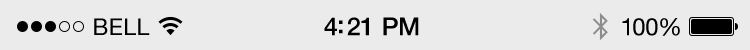
<style>
.page{position:relative;width:750px;height:50px;background:#ecebeb}
.page>*{position:absolute;margin:0}
.t1{font:25px "HelveticaNeue-Medium";letter-spacing:-0.02em;color:#000000}
.t2{font:23px "HelveticaNeue";letter-spacing:0.02em;color:#000000}
.t3{font:24px "HelveticaNeue";letter-spacing:-0.02em;color:#010101}
</style>
<div class="page">
<p class="t1" style="left:324px;top:17px;width:95px;height:19px">4:21 PM</p>
<p class="t2" style="left:94px;top:18px;width:56px;height:17px">BELL</p>
<p class="t3" style="left:622px;top:18px;width:58px;height:18px">100%</p>
</div>
